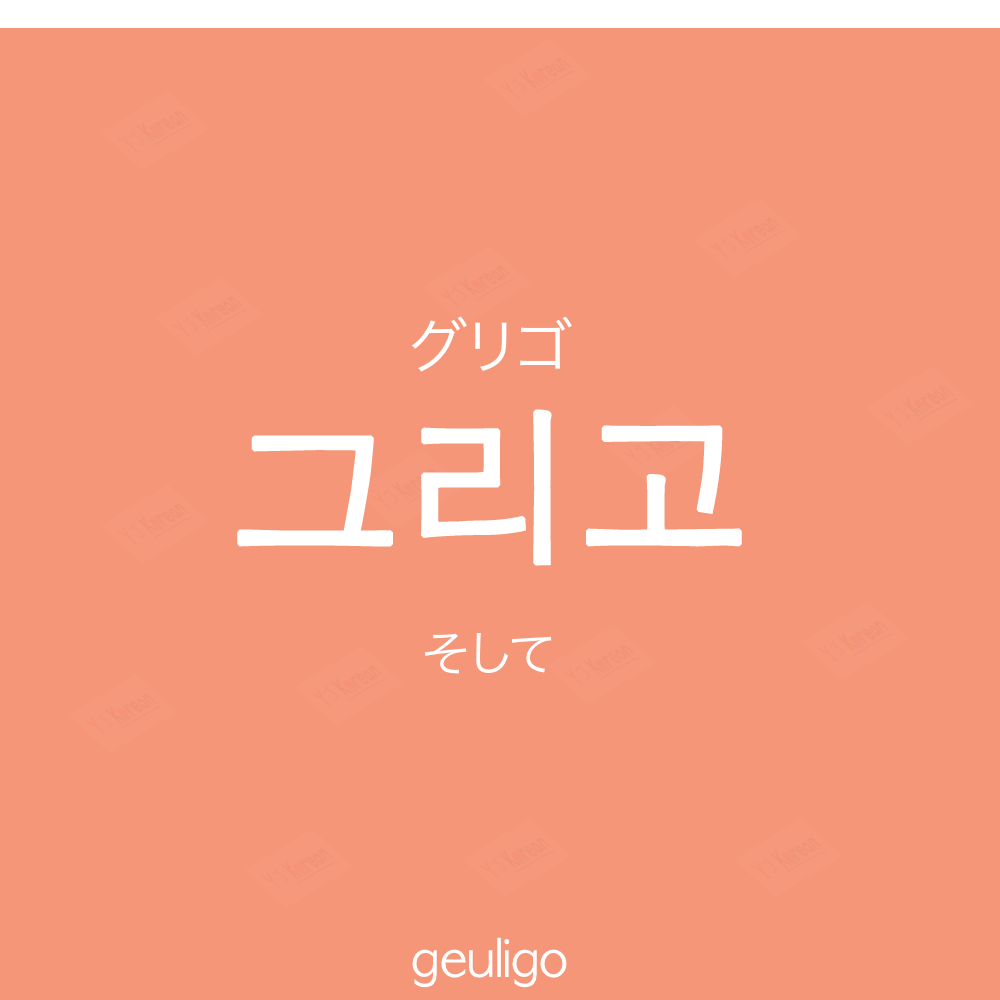
<style>
.page{position:relative;width:1000px;height:1000px;background:#f69679}
.page>*{position:absolute;margin:0}
.t1{font:60px "HiraKakuProN-W3";color:#ffffff;text-transform:uppercase}
.t2{font:170px "AppleGothic";color:#ffffff;font-weight:bold}
.t3{font:50px "HiraKakuProN-W3";color:#ffffff}
.t4{font:50px "AppleGothic";color:#ffffff}
</style>
<div class="page">
<p class="t1" style="left:411px;top:316px;width:161px;height:56px">グリゴ</p>
<p class="t2" style="left:237px;top:409px;width:505px;height:157px">그리고</p>
<p class="t3" style="left:424px;top:633px;width:128px;height:41px">そして</p>
<p class="t4" style="left:412px;top:937px;width:155px;height:51px">geuligo</p>
</div>
